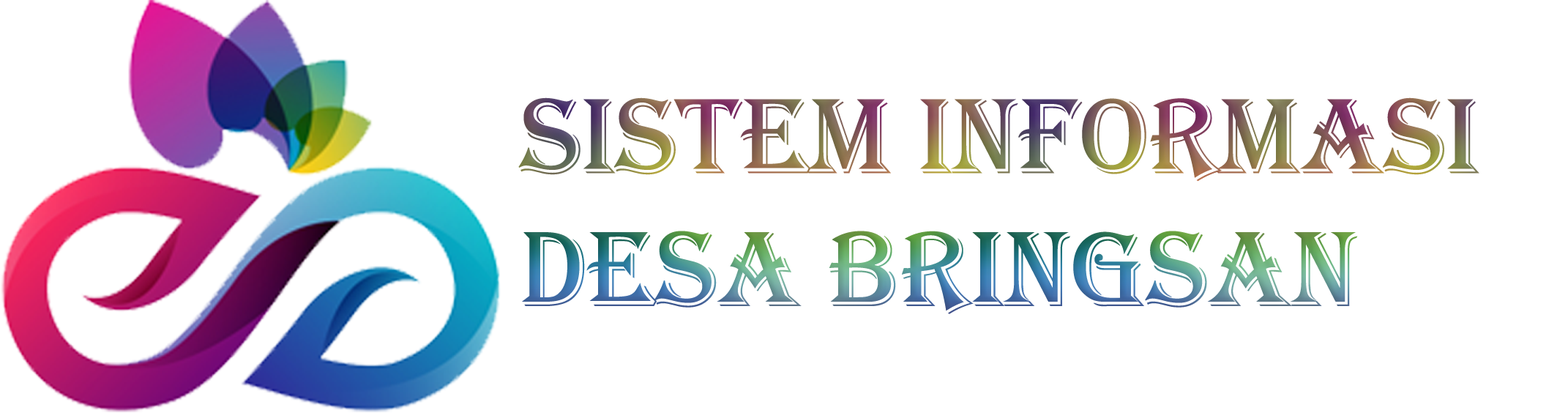
<style>
.page{position:relative;width:1568px;height:413px;background:#ffffff}
.page>*{position:absolute;margin:0}
.t1{font:110.7px "Algerian"}
</style>
<div class="page">
<p class="t1" style="left:518px;top:97px;width:961px;height:217px">SISTEM INFORMASI <br>DESA BRINGSAN</p>
</div>
